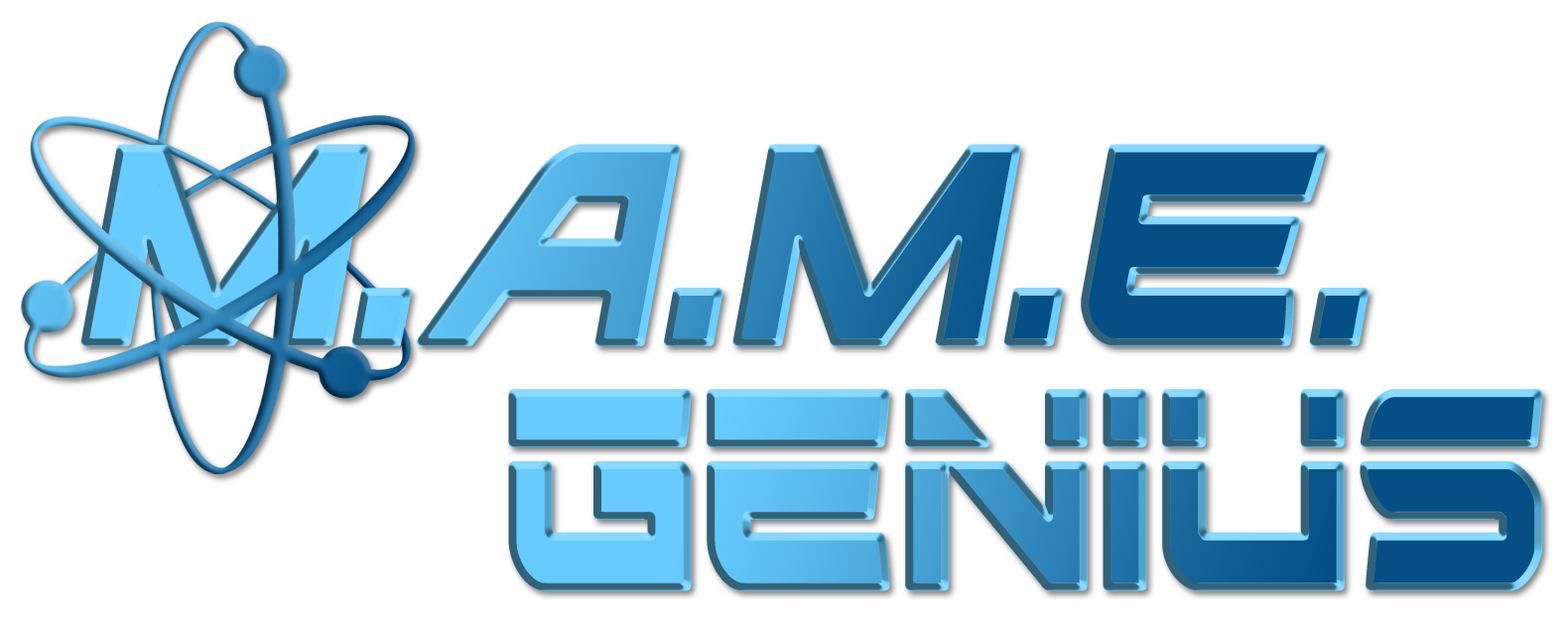
<style>
.page{position:relative;width:1568px;height:625px;background:#ffffff}
.page>*{position:absolute;margin:0}
.t1{font:401.1px "GhostClanExpandedItalic";scale:0.69 1}
.t2{font:401.1px "GhostClanLaser";scale:0.69 1}
</style>
<div class="page">
<p class="t1" style="left:84px;top:148px;width:1282px;height:194px">M.A.M.E.</p>
<p class="t2" style="left:512px;top:393px;width:1027px;height:195px">Genius</p>
</div>
